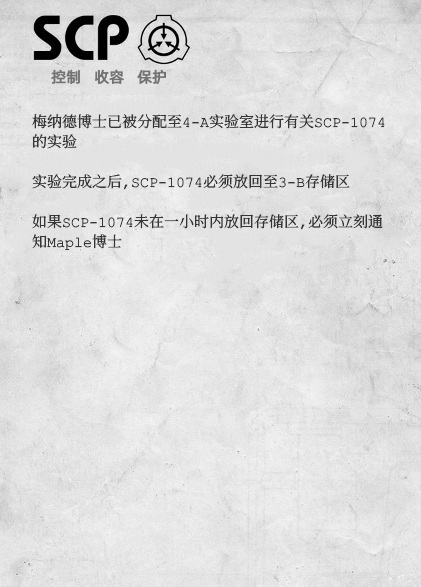
<style>
.page{position:relative;width:421px;height:587px}
.page>*{position:absolute;margin:0}
.t1{font:15px "AlibabaPuHuiTiR";color:#737373;font-weight:bold}
.t2{font:15px/20px "ContainmentBreach-Regular";color:#353535}
</style>
<div class="page">
<p class="t1" style="left:51px;top:69px;width:115px;height:15px">控制   收容   保护</p>
<p class="t2" style="left:32px;top:114px;width:353px;height:136px">梅纳德博士已被分配至4-A实验室进行有关SCP-1074<br>的实验<br><br>实验完成之后，SCP-1074必须放回至3-B存储区<br><br>如果SCP-1074未在一小时内放回存储区，必须立刻通<br>知Maple博士</p>
</div>
